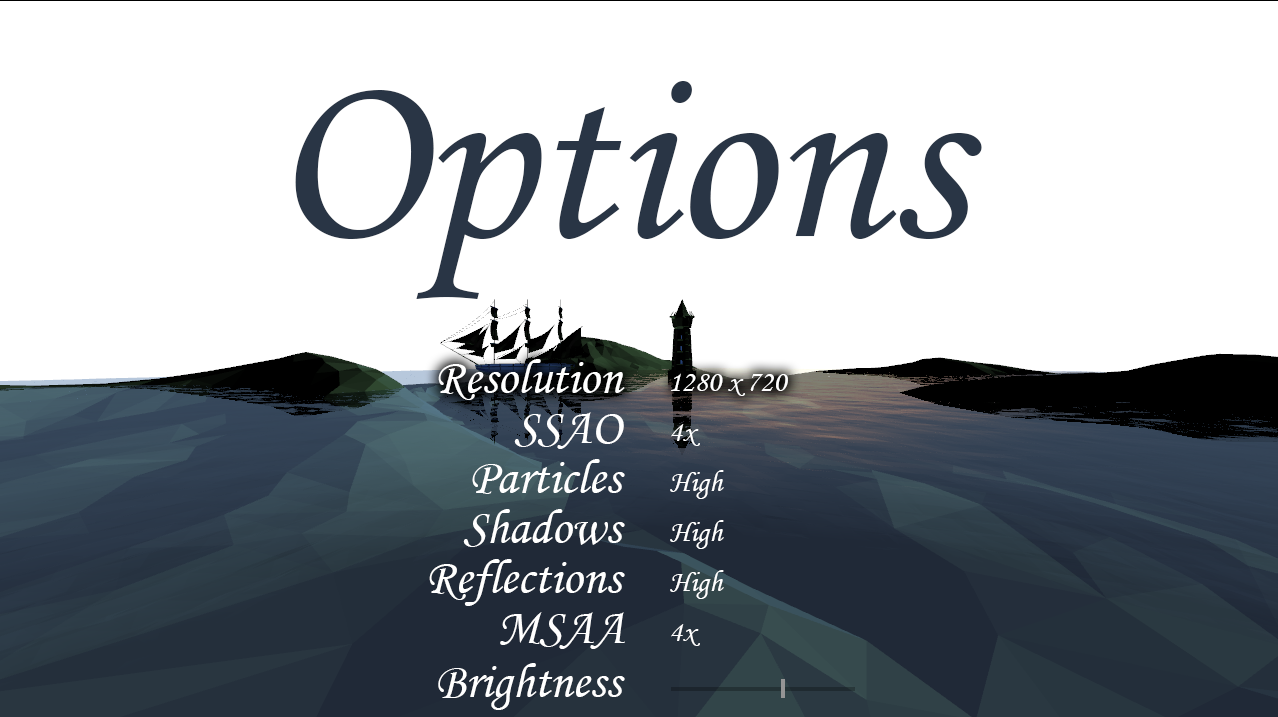
<style>
.page{position:relative;width:1278px;height:717px;background:#ffffff}
.page>*{position:absolute;margin:0}
.t1{font:250px "MonotypeCorsiva";color:#293545}
.t2{font:50px "MonotypeCorsiva";color:#ffffff}
.t3{font:30px "MonotypeCorsiva";color:#ffffff}
</style>
<div class="page">
<p class="t1" style="left:295px;top:81px;width:687px;height:218px">Options</p>
<p class="t2" style="left:438px;top:359px;width:187px;height:41px">Resolution</p>
<p class="t3" style="left:671px;top:373px;width:117px;height:23px">1280 x 720</p>
<p class="t2" style="left:514px;top:412px;width:110px;height:37px">SSAO</p>
<p class="t3" style="left:671px;top:424px;width:29px;height:22px">4x</p>
<p class="t2" style="left:472px;top:459px;width:153px;height:35px">Particles</p>
<p class="t3" style="left:670px;top:470px;width:54px;height:29px">High</p>
<p class="t2" style="left:463px;top:509px;width:162px;height:38px">Shadows</p>
<p class="t3" style="left:670px;top:520px;width:54px;height:29px">High</p>
<p class="t2" style="left:429px;top:559px;width:196px;height:47px">Reflections</p>
<p class="t3" style="left:670px;top:570px;width:54px;height:29px">High</p>
<p class="t2" style="left:500px;top:612px;width:125px;height:37px">MSAA</p>
<p class="t3" style="left:671px;top:624px;width:29px;height:22px">4x</p>
<p class="t2" style="left:438px;top:663px;width:187px;height:47px">Brightness</p>
</div>
